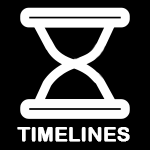
<style>
.page{position:relative;width:150px;height:150px;background:#000000}
.page>*{position:absolute;margin:0}
.t1{font:20px "ArialRoundedMTBold";letter-spacing:-0.005em;color:#ffffff;text-transform:uppercase;font-weight:bold}
</style>
<div class="page">
<p class="t1" style="left:17px;top:127px;width:113px;height:15px">TimeLines</p>
</div>
